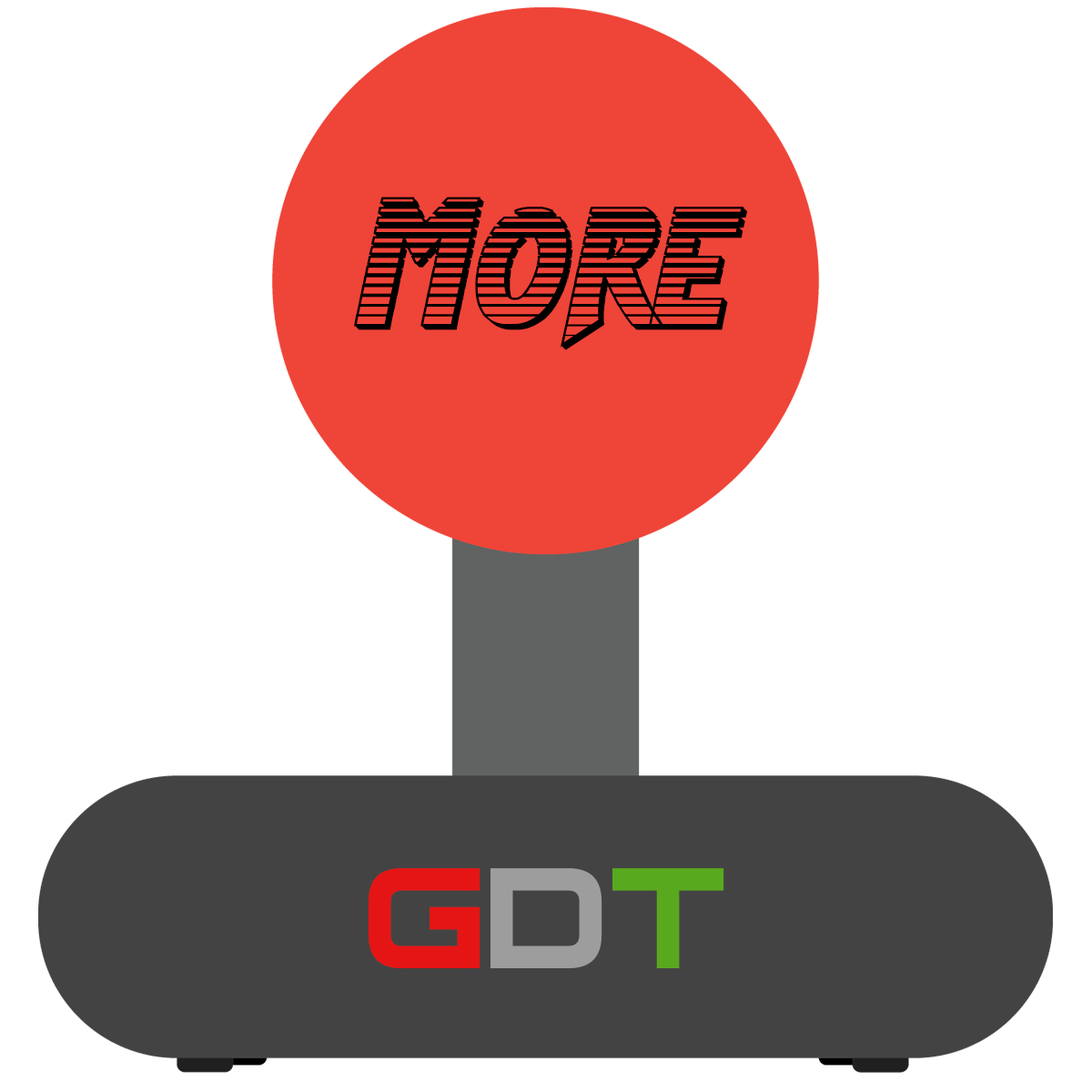
<style>
.page{position:relative;width:1092px;height:1092px;background:#ffffff}
.page>*{position:absolute;margin:0}
.t1{font:182px "FlashRogersChrome";color:#000000}
.t2{font:227.5px "NesController";color:#e51515}
.t3{font:227.5px "NesController";color:#9d9d9d}
.t4{font:227.5px "NesController";color:#59a91e}
</style>
<div class="page">
<p class="t1" style="left:354px;top:197px;width:394px;height:153px">More</p>
<p class="t2" style="left:369px;top:868px;width:355px;height:100px">G<span class="t3">D</span><span class="t4">T</span></p>
</div>
